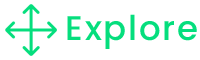
<style>
.page{position:relative;width:200px;height:60px;background:#ffffff}
.page>*{position:absolute;margin:0}
.t1{font:34px "Poppins-Medium";letter-spacing:0.05em;color:#05de7d}
</style>
<div class="page">
<p class="t1" style="left:67px;top:14px;width:130px;height:35px">Explore</p>
</div>
